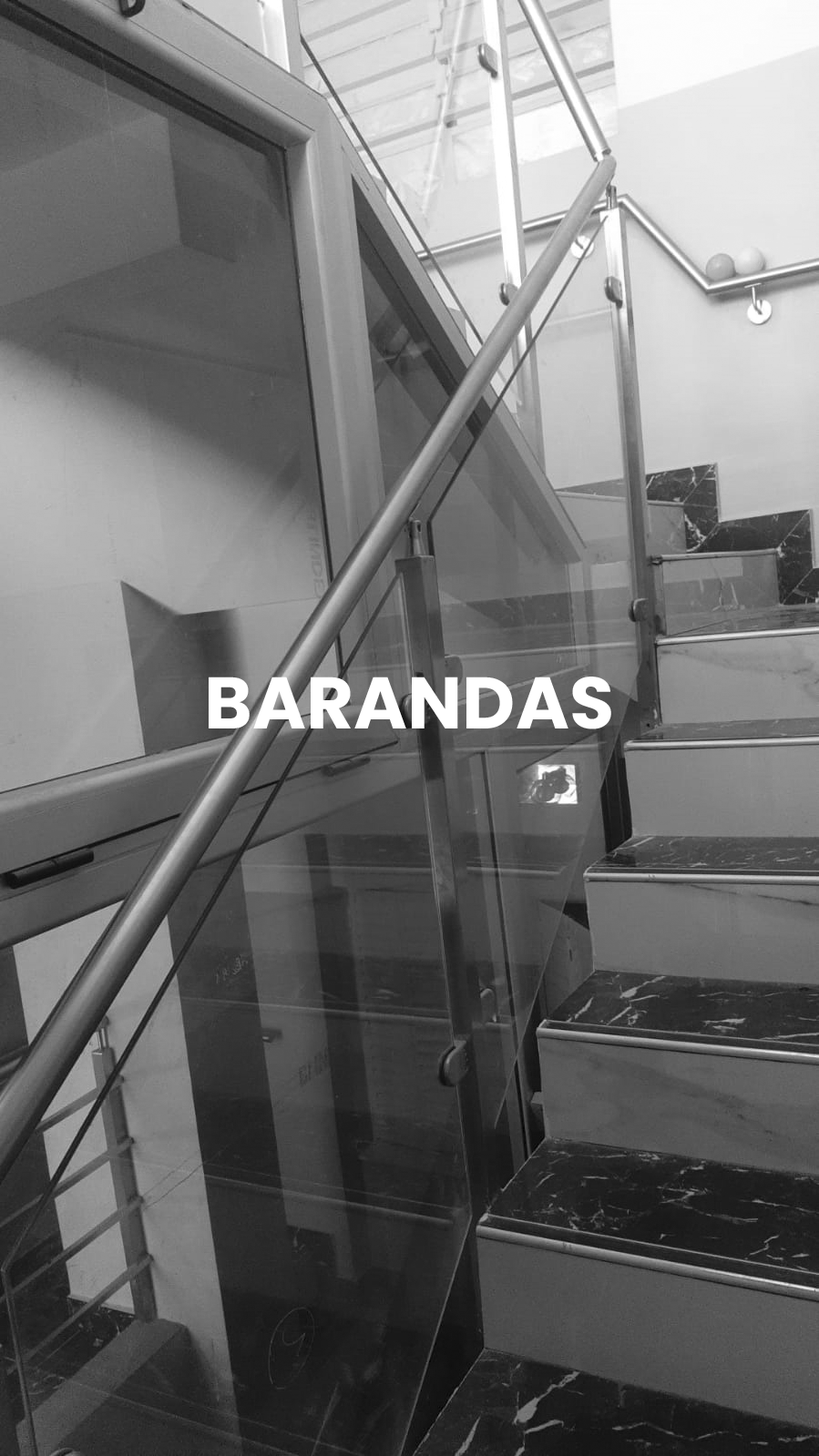
<style>
.page{position:relative;width:819px;height:1456px}
.page>*{position:absolute;margin:0}
.t1{font:72.9px "Poppins-Bold";color:#ffffff}
</style>
<div class="page">
<p class="t1" style="left:209px;top:677px;width:402px;height:53px">BARANDAS</p>
</div>
